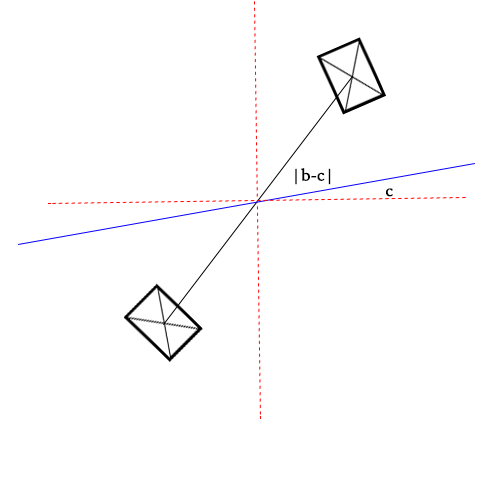
<style>
.page{position:relative;width:480px;height:480px;background:#ffffff}
.page>*{position:absolute;margin:0}
.t1{font:18px "STSong";color:#000000;font-weight:bold}
</style>
<div class="page">
<p class="t1" style="left:295px;top:168px;width:36px;height:17px">|b-c|</p>
<p class="t1" style="left:386px;top:188px;width:7px;height:9px">c</p>
</div>
